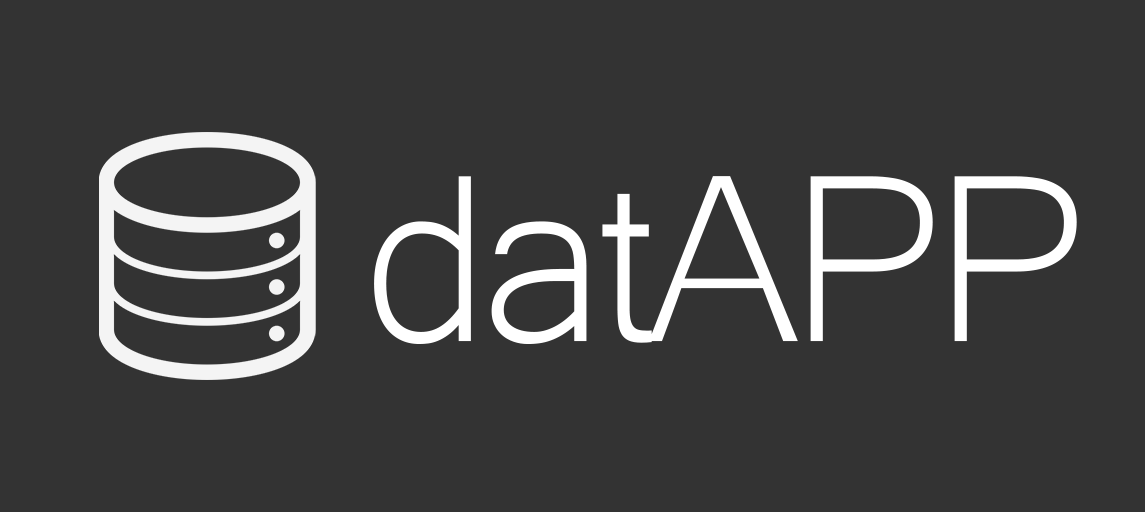
<style>
.page{position:relative;width:1145px;height:512px;background:#333333}
.page>*{position:absolute;margin:0}
.t1{font:308.3px "Microsoft-Yi-Baiti";letter-spacing:-0.041em;color:#ffffff}
</style>
<div class="page">
<p class="t1" style="left:374px;top:176px;width:703px;height:168px">datAPP</p>
</div>
